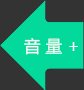
<style>
.page{position:relative;width:84px;height:90px;background:#333333}
.page>*{position:absolute;margin:0}
.t1{font:16.7px "MicrosoftYaHei";color:#ffffff}
</style>
<div class="page">
<p class="t1" style="left:24px;top:38px;width:54px;height:17px">音 量 +</p>
</div>
